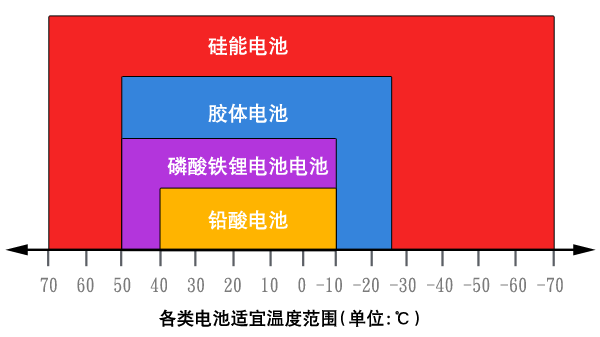
<style>
.page{position:relative;width:600px;height:337px;background:#ffffff}
.page>*{position:absolute;margin:0}
.t1{font:20.2px "DFHei-Md-80-Win-GB";color:#ffffff}
.t2{font:18px "DFHei-Md-80-Win-GB";color:#7b7b7b}
.t3{font:18px "DFHei-Md-80-Win-GB";color:#000000}
</style>
<div class="page">
<p class="t1" style="left:208px;top:36px;width:80px;height:20px">硅能电池</p>
<p class="t1" style="left:208px;top:103px;width:80px;height:20px">胶体电池</p>
<p class="t1" style="left:167px;top:156px;width:162px;height:20px">磷酸铁锂电池电池</p>
<p class="t1" style="left:208px;top:210px;width:80px;height:20px">铅酸电池</p>
<p class="t2" style="left:40px;top:277px;width:523px;height:16px">70  60  50  40  30  20  10  0 -10 -20 -30 -40 -50 -60 -70</p>
<p class="t3" style="left:159px;top:309px;width:178px;height:18px">各类电池适宜温度范围</p>
<p class="t3" style="left:341px;top:309px;width:78px;height:18px">（单位:℃）</p>
</div>
